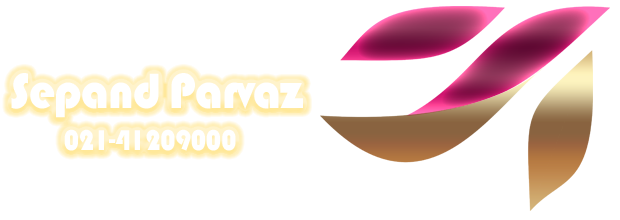
<style>
.page{position:relative;width:620px;height:220px;background:#ffffff}
.page>*{position:absolute;margin:0}
.t1{font:51.2px "Bauhaus93";letter-spacing:-0.02em;color:#ffffff;scale:0.93 1}
.t2{font:29.9px "Bauhaus93";letter-spacing:-0.02em;color:#ffffff;scale:0.93 1}
</style>
<div class="page">
<p class="t1" style="left:11px;top:73px;width:292px;height:45px">Sepand Parvaz</p>
<p class="t2" style="left:64px;top:129px;width:172px;height:22px">021-41209000</p>
</div>
